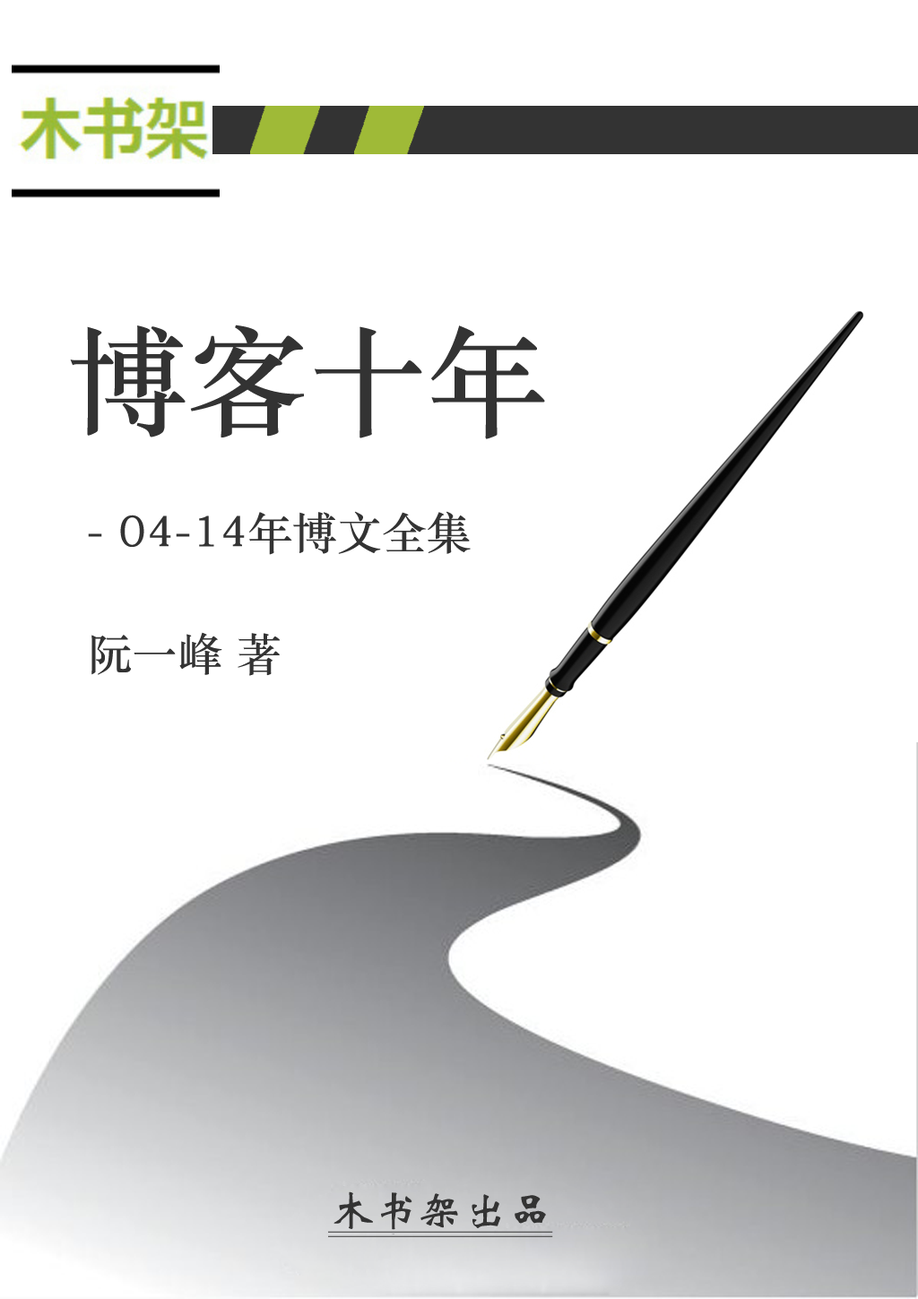
<style>
.page{position:relative;width:918px;height:1299px;background:#ffffff}
.page>*{position:absolute;margin:0}
.t1{font:119.5px "STZhongsong";color:#333333}
.t2{font:44.8px "STZhongsong";color:#333333}
.t3{font:44.8px "STXinwei";color:#333333;text-decoration:underline}
</style>
<div class="page">
<p class="t1" style="left:70px;top:325px;width:475px;height:114px">博客十年</p>
<p class="t2" style="left:88px;top:511px;width:383px;height:44px">- 04-14年博文全集</p>
<p class="t2" style="left:91px;top:632px;width:190px;height:44px">阮一峰 著</p>
<p class="t3" style="left:328px;top:1191px;width:225px;height:42px">木书架出品</p>
</div>
